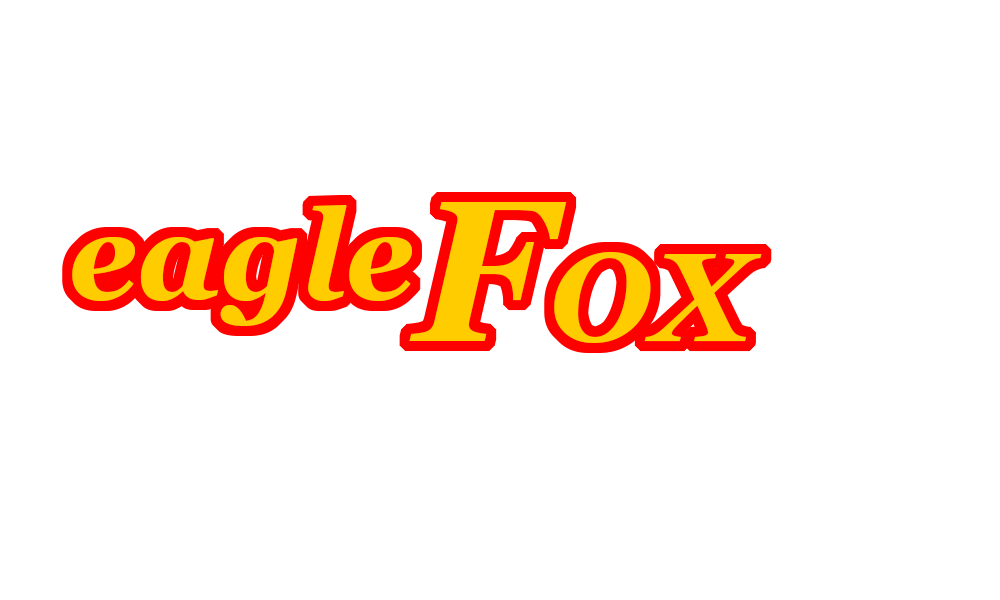
<style>
.page{position:relative;width:1000px;height:600px;background:#ffffff}
.page>*{position:absolute;margin:0}
.t1{font:125px "Georgia-BoldItalic";color:#ffcc00}
.t2{font:200px "Georgia-BoldItalic";color:#ffcc00}
</style>
<div class="page">
<p class="t1" style="left:72px;top:202px;width:690px;height:141px">eagle<span class="t2">F</span>OX</p>
</div>
